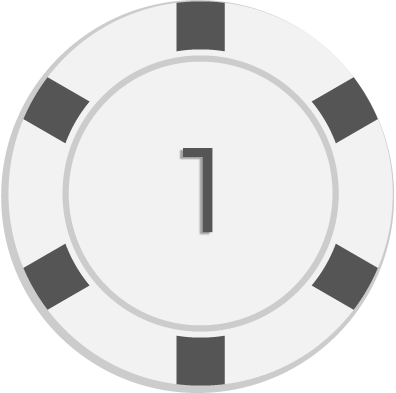
<style>
.page{position:relative;width:396px;height:393px;background:#f2f2f2}
.page>*{position:absolute;margin:0}
.t1{font:120px "Montserrat-Light";color:#555555}
</style>
<div class="page">
<p class="t1" style="left:183px;top:148px;width:30px;height:85px">1</p>
</div>
